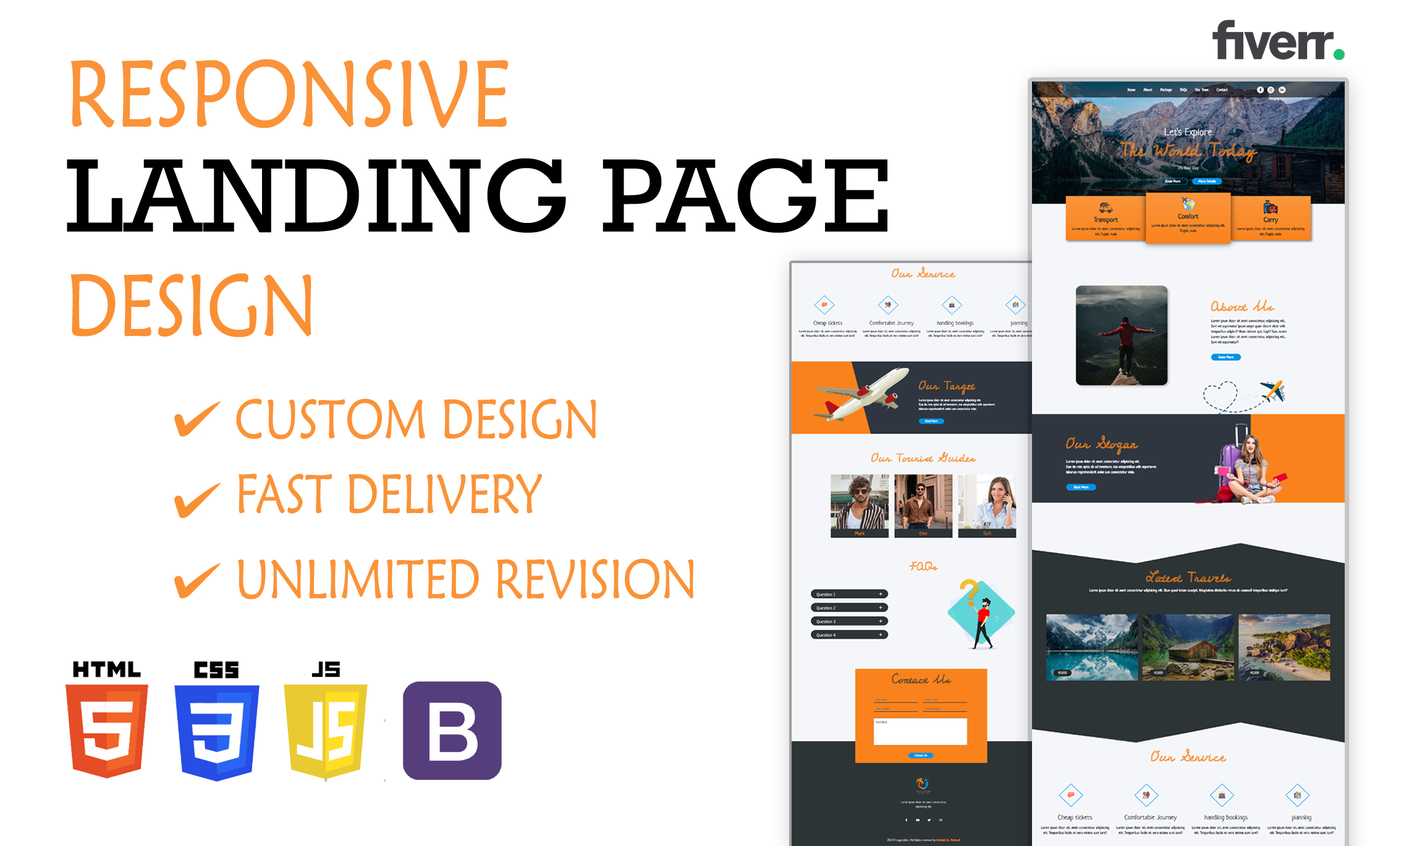
<style>
.page{position:relative;width:1409px;height:846px;background:#ffffff}
.page>*{position:absolute;margin:0}
.t1{font:93.9px "MaiandraGD-Regular";letter-spacing:0.01em;color:#fa9339;scale:0.82 1}
.t2{font:106.3px "Rockwell";letter-spacing:0.01em;color:#000000;scale:1.04 1}
.t3{font:87.4px "MaiandraGD-Regular";color:#fa9034;scale:0.82 1}
.t4{font:55.3px "MaiandraGD-Regular";color:#fa9339;scale:0.82 1}
</style>
<div class="page">
<p class="t1" style="left:70px;top:59px;width:438px;height:70px">RESPONSIVE</p>
<p class="t2" style="left:67px;top:158px;width:820px;height:75px">LANDING PAGE</p>
<p class="t3" style="left:70px;top:273px;width:241px;height:64px">DESIGN</p>
<p class="t4" style="left:236px;top:399px;width:360px;height:41px">CUSTOM DESIGN</p>
<p class="t4" style="left:238px;top:474px;width:304px;height:41px">FAST DELIVERY</p>
<p class="t4" style="left:238px;top:559px;width:455px;height:41px">UNLIMITED REVISION</p>
</div>
